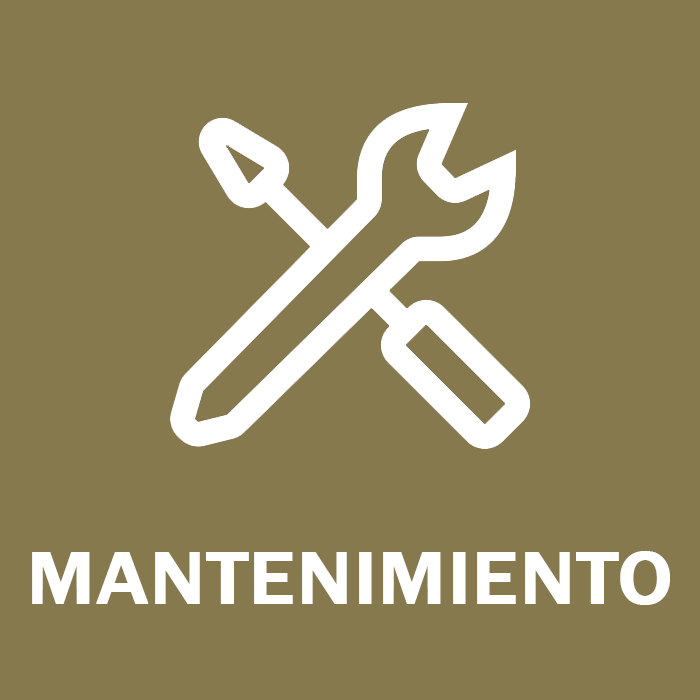
<style>
.page{position:relative;width:700px;height:700px;background:#87794e}
.page>*{position:absolute;margin:0}
.t1{font:77px "FranklinGothic-Medium";color:#ffffff;font-weight:bold;scale:1.09 1}
</style>
<div class="page">
<p class="t1" style="left:32px;top:551px;width:638px;height:54px">MANTENIMIENTO</p>
</div>
